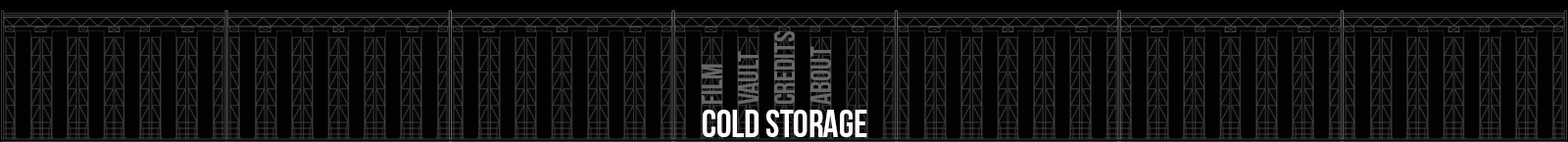
<style>
.page{position:relative;width:1568px;height:142px;background:#010202}
.page>*{position:absolute;margin:0}
.t1{font:29.6px "BebasNeue";color:#666666}
.t2{font:38.3px "BebasNeue";color:#ffffff}
</style>
<div class="page">
<p class="t1" style="left:774px;top:31px;width:21px;height:73px;rotate:-90deg">CREDITS</p>
<p class="t1" style="left:738px;top:51px;width:21px;height:54px;rotate:-90deg">VAULT</p>
<p class="t1" style="left:810px;top:46px;width:21px;height:59px;rotate:-90deg">ABOUT</p>
<p class="t1" style="left:702px;top:64px;width:20px;height:40px;rotate:-90deg">FILM</p>
<p class="t2" style="left:703px;top:110px;width:164px;height:27px">COLD STORAGE</p>
</div>
